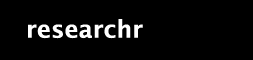
<style>
.page{position:relative;width:253px;height:60px;background:#000000}
.page>*{position:absolute;margin:0}
.t1{font:24px "LucidaGrande-Bold";color:#ffffff}
</style>
<div class="page">
<p class="t1" style="left:28px;top:19px;width:115px;height:20px">researchr</p>
</div>
